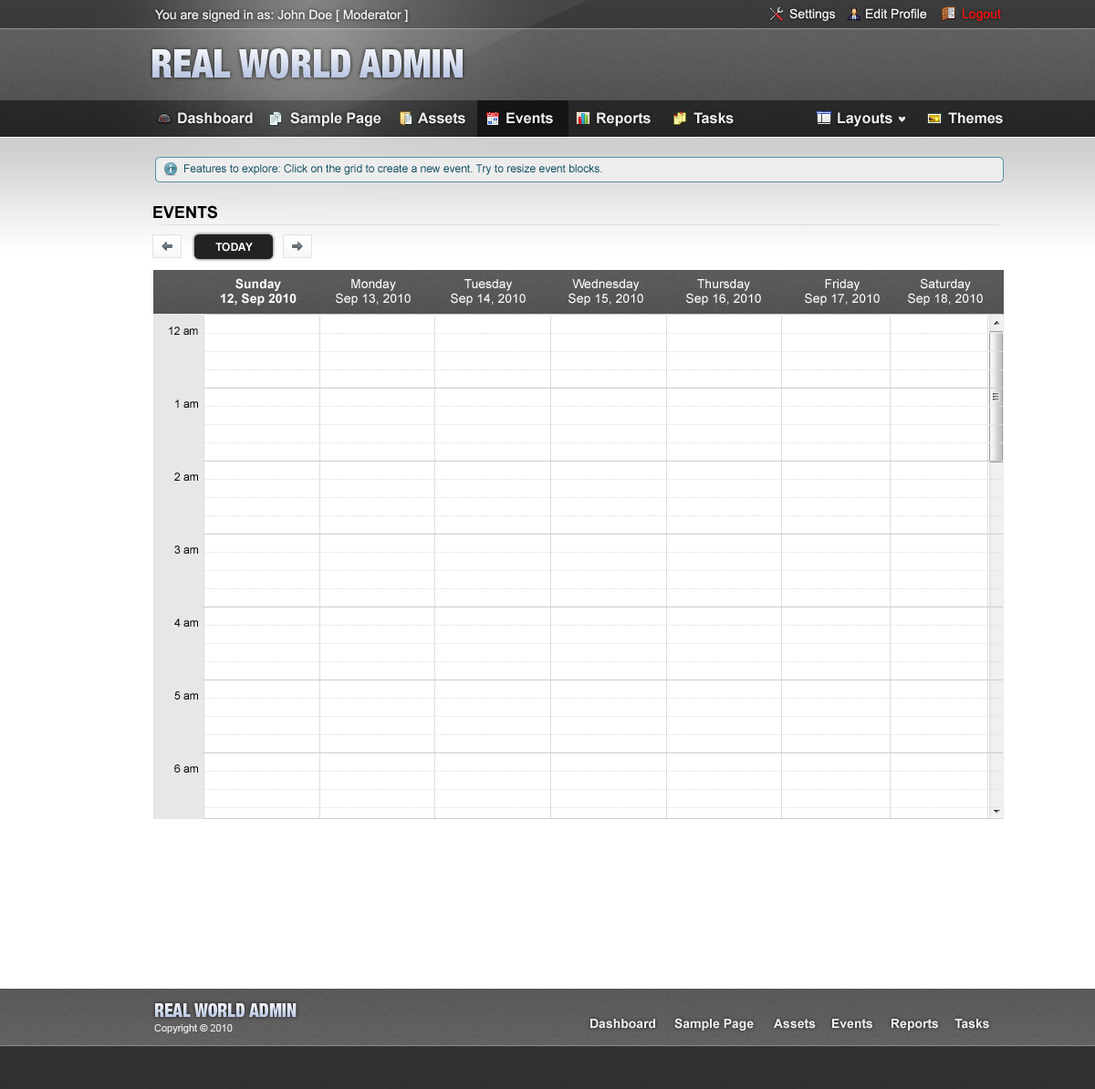
<style>
.page{position:relative;width:1095px;height:1089px;background:#ffffff}
.page>*{position:absolute;margin:0}
.t1{font:12.8px "ArialMT";color:#efefef}
.t2{font:12.8px "ArialMT";color:#fa0f0f}
.t3{font:14.6px "Arial-BoldMT";color:#efefef}
.t4{font:10.9px "ArialMT";color:#165163}
.t5{font:16.4px "Arial-BoldMT";color:#000000;text-transform:uppercase}
.t6{font:10.9px "Arial-BoldMT";color:#ffffff;text-transform:uppercase}
.t7{font:12.8px/14.6px "Arial-BoldMT";color:#ffffff}
.t8{font:12.8px/14.6px "ArialMT";color:#ffffff}
.t9{font:10.9px "ArialMT";color:#010101}
.t10{font:10px "ArialMT";color:#e5e5e5}
.t11{font:12.8px "Arial-BoldMT";color:#efefef}
</style>
<div class="page">
<p class="t1" style="left:155px;top:9px;width:253px;height:13px">You are signed in as: John Doe [ Moderator ]</p>
<p class="t1" style="left:789px;top:8px;width:47px;height:13px">Settings</p>
<p class="t1" style="left:866px;top:8px;width:61px;height:11px">Edit Profile</p>
<p class="t2" style="left:962px;top:8px;width:39px;height:13px">Logout</p>
<p class="t3" style="left:178px;top:112px;width:75px;height:12px">Dashboard</p>
<p class="t3" style="left:290px;top:112px;width:91px;height:15px">Sample Page</p>
<p class="t3" style="left:418px;top:112px;width:47px;height:12px">Assets</p>
<p class="t3" style="left:506px;top:112px;width:47px;height:12px">Events</p>
<p class="t3" style="left:597px;top:112px;width:53px;height:15px">Reports</p>
<p class="t3" style="left:693px;top:112px;width:40px;height:12px">Tasks</p>
<p class="t3" style="left:837px;top:112px;width:55px;height:15px">Layouts</p>
<p class="t3" style="left:948px;top:112px;width:55px;height:12px">Themes</p>
<p class="t4" style="left:184px;top:164px;width:418px;height:11px">Features to explore: Click on the grid to create a new event. Try to resize event blocks.</p>
<p class="t5" style="left:153px;top:205px;width:64px;height:14px">Events</p>
<p class="t6" style="left:215px;top:243px;width:38px;height:9px">Today</p>
<p class="t7" style="left:221px;top:278px;width:75px;height:28px;text-align:center">Sunday<br>12, Sep 2010</p>
<p class="t8" style="left:336px;top:279px;width:75px;height:27px;text-align:center">Monday<br>Sep 13, 2010</p>
<p class="t8" style="left:451px;top:279px;width:74px;height:27px;text-align:center">Tuesday<br>Sep 14, 2010</p>
<p class="t8" style="left:568px;top:279px;width:75px;height:27px;text-align:center">Wednesday<br>Sep 15, 2010</p>
<p class="t8" style="left:686px;top:279px;width:75px;height:27px;text-align:center">Thursday<br>Sep 16, 2010</p>
<p class="t8" style="left:805px;top:279px;width:74px;height:27px;text-align:center">Friday<br>Sep 17, 2010</p>
<p class="t8" style="left:908px;top:278px;width:75px;height:28px;text-align:center">Saturday<br>Sep 18, 2010</p>
<p class="t9" style="left:169px;top:327px;width:29px;height:8px">12 am</p>
<p class="t9" style="left:175px;top:400px;width:23px;height:8px">1 am</p>
<p class="t9" style="left:174px;top:473px;width:24px;height:8px">2 am</p>
<p class="t9" style="left:174px;top:546px;width:24px;height:8px">3 am</p>
<p class="t9" style="left:174px;top:619px;width:24px;height:8px">4 am</p>
<p class="t9" style="left:174px;top:692px;width:24px;height:8px">5 am</p>
<p class="t9" style="left:174px;top:764px;width:24px;height:9px">6 am</p>
<p class="t10" style="left:154px;top:1024px;width:79px;height:10px">Copyright © 2010</p>
<p class="t11" style="left:590px;top:1019px;width:65px;height:10px">Dashboard</p>
<p class="t11" style="left:674px;top:1018px;width:80px;height:13px">Sample Page</p>
<p class="t11" style="left:774px;top:1019px;width:42px;height:10px">Assets</p>
<p class="t11" style="left:832px;top:1019px;width:40px;height:10px">Events</p>
<p class="t11" style="left:891px;top:1019px;width:47px;height:12px">Reports</p>
<p class="t11" style="left:954px;top:1019px;width:35px;height:10px">Tasks</p>
</div>
